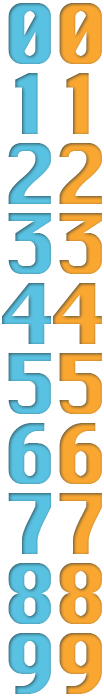
<style>
.page{position:relative;width:104px;height:700px;background:#ffffff}
.page>*{position:absolute;margin:0}
.t1{font:80px/70px "Krungthep";color:#59c1e1;font-weight:bold}
.t2{font:80px/70px "Silom";color:#faa732;font-weight:bold}
</style>
<div class="page">
<p class="t1" style="left:2px;top:3px;width:49px;height:691px;text-align:center">0<br>1<br>2<br>3<br>4<br>5<br>6<br>7<br>8<br>9</p>
<p class="t2" style="left:53px;top:3px;width:49px;height:691px;text-align:center">0<br>1<br>2<br>3<br>4<br>5<br>6<br>7<br>8<br>9</p>
</div>
